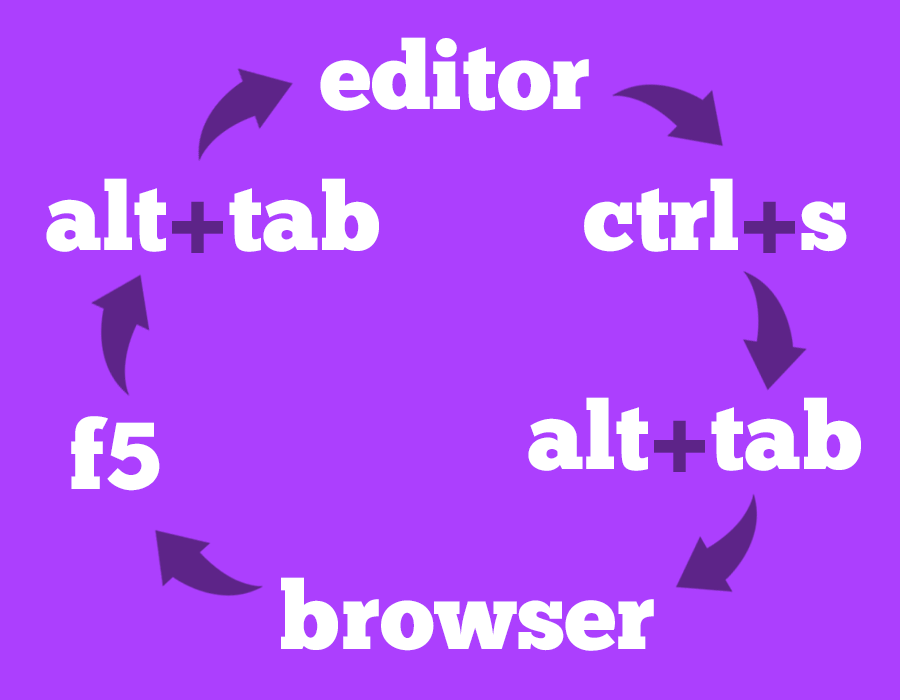
<style>
.page{position:relative;width:900px;height:700px;background:#ac3ffe}
.page>*{position:absolute;margin:0}
.t1{font:94.9px "ChunkFive-Roman";color:#ffffff}
.t2{font:94.9px "ChunkFive-Roman";color:#5d2488}
</style>
<div class="page">
<p class="t1" style="left:320px;top:37px;width:269px;height:74px">editor</p>
<p class="t1" style="left:46px;top:178px;width:333px;height:75px">alt<span class="t2">+</span>tab</p>
<p class="t1" style="left:584px;top:178px;width:263px;height:75px">ctrl<span class="t2">+</span>s</p>
<p class="t1" style="left:528px;top:397px;width:333px;height:75px">alt<span class="t2">+</span>tab</p>
<p class="t1" style="left:71px;top:416px;width:89px;height:75px">f5</p>
<p class="t1" style="left:281px;top:577px;width:373px;height:74px">browser</p>
</div>
